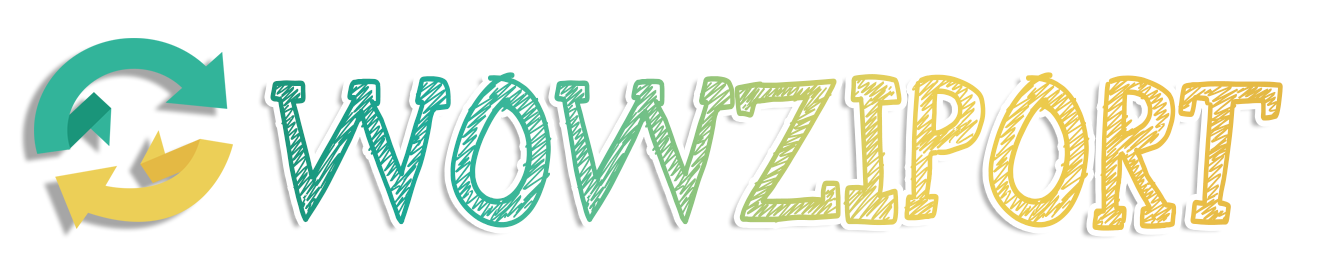
<style>
.page{position:relative;width:1319px;height:262px;background:#ffffff}
.page>*{position:absolute;margin:0}
.t1{font:170.4px "Delusional";scale:0.84 1}
</style>
<div class="page">
<p class="t1" style="left:270px;top:72px;width:1013px;height:159px">WOWZIPORT</p>
</div>
